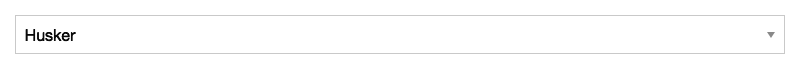
<style>
.page{position:relative;width:800px;height:69px;background:#ffffff}
.page>*{position:absolute;margin:0}
.t1{font:12px "MyriadPro-Regular";color:#0a0a0a}
</style>
<div class="page">
<p class="t1" style="left:25px;top:29px;width:51px;height:13px">Husker</p>
</div>
